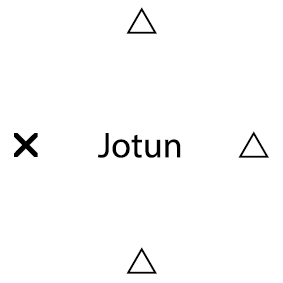
<style>
.page{position:relative;width:283px;height:283px;background:#ffffff}
.page>*{position:absolute;margin:0}
.t1{font:36px "MyriadPro-Regular";color:#000000}
</style>
<div class="page">
<p class="t1" style="left:98px;top:133px;width:83px;height:25px">Jotun</p>
</div>
